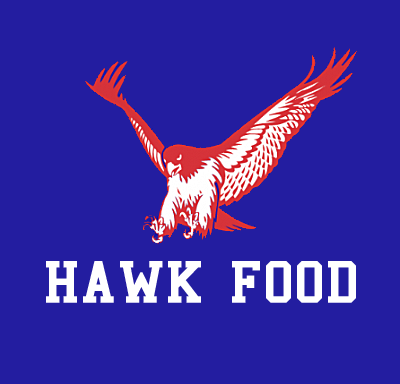
<style>
.page{position:relative;width:400px;height:384px;background:#231da0}
.page>*{position:absolute;margin:0}
.t1{font:60px "College";color:#ffffff;font-weight:bold}
</style>
<div class="page">
<p class="t1" style="left:46px;top:261px;width:310px;height:42px">HAWK FOOD</p>
</div>
